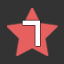
<style>
.page{position:relative;width:64px;height:64px;background:#333333}
.page>*{position:absolute;margin:0}
.t1{font:36px "SquareFont";letter-spacing:0.075em;color:#ffffff}
</style>
<div class="page">
<p class="t1" style="left:22px;top:20px;width:18px;height:26px">7</p>
</div>
